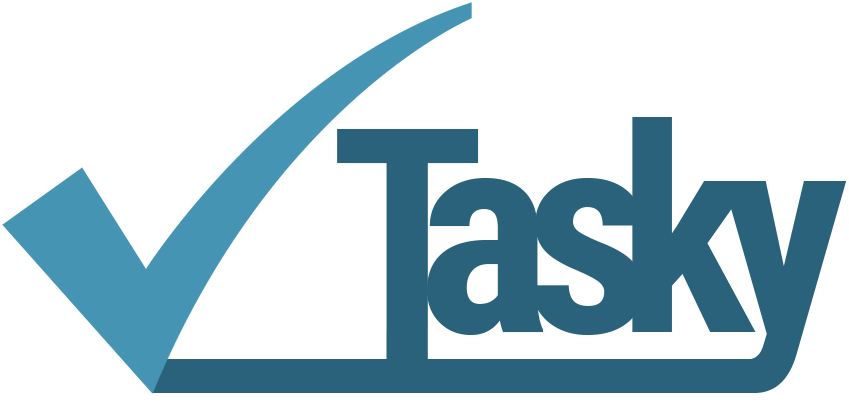
<style>
.page{position:relative;width:849px;height:415px;background:#ffffff}
.page>*{position:absolute;margin:0}
.t1{font:286px "RobotoCondensed-Bold";color:#29627a}
</style>
<div class="page">
<p class="t1" style="left:337px;top:117px;width:510px;height:276px">Tasky</p>
</div>
